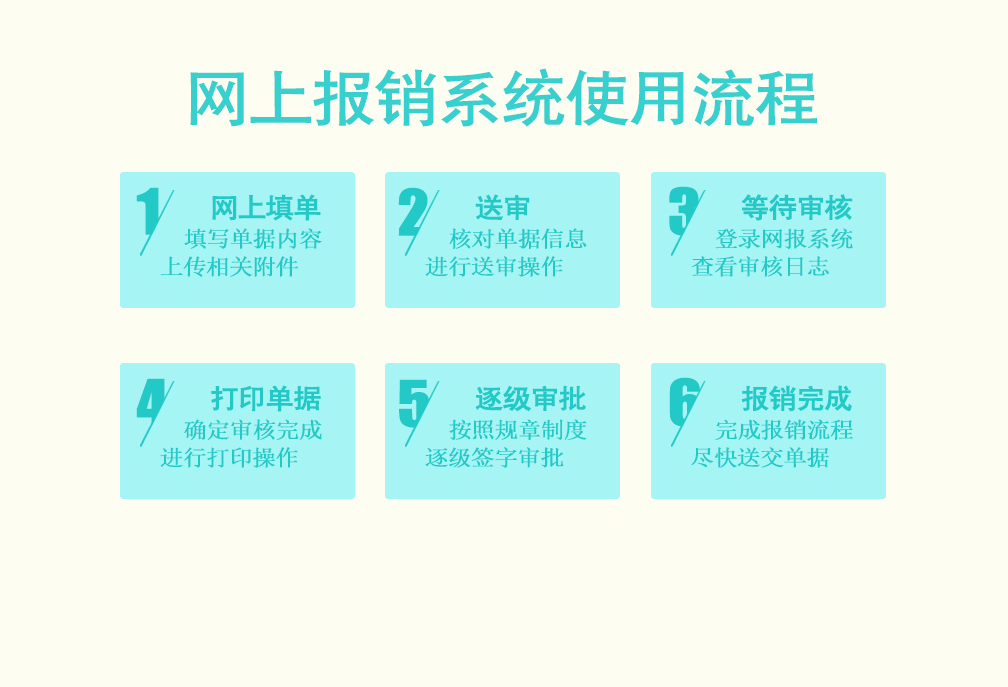
<style>
.page{position:relative;width:1008px;height:687px;background:#fefdf2}
.page>*{position:absolute;margin:0}
.t1{font:60px "-G-h-e-i-0-1-m";letter-spacing:-0.04em;color:#37d0ce;font-weight:bold;scale:1.07 1}
.t2{font:58.5px "Impact";letter-spacing:-0.04em;color:#23c9c7;font-weight:bold;scale:1.07 1}
.t3{font:26.5px "-G-h-e-i-0-1-m";letter-spacing:-0.04em;color:#23c9c7;font-weight:bold;scale:1.06 1}
.t4{font:22.1px "SimSun";letter-spacing:-0.04em;color:#23c9c7;font-weight:bold;scale:1.06 1}
</style>
<div class="page">
<p class="t1" style="left:190px;top:68px;width:627px;height:59px">网上报销系统使用流程</p>
<p class="t2" style="left:136px;top:187px;width:23px;height:48px">1</p>
<p class="t3" style="left:212px;top:194px;width:109px;height:27px">网上填单</p>
<p class="t2" style="left:398px;top:187px;width:30px;height:49px">2</p>
<p class="t3" style="left:475px;top:194px;width:55px;height:26px">送审</p>
<p class="t2" style="left:669px;top:186px;width:30px;height:50px">3</p>
<p class="t3" style="left:741px;top:194px;width:112px;height:27px">等待审核</p>
<p class="t4" style="left:184px;top:228px;width:138px;height:21px">填写单据内容</p>
<p class="t4" style="left:449px;top:228px;width:138px;height:21px">核对单据信息</p>
<p class="t4" style="left:715px;top:228px;width:138px;height:21px">登录网报系统</p>
<p class="t4" style="left:160px;top:256px;width:139px;height:21px">上传相关附件</p>
<p class="t4" style="left:425px;top:256px;width:138px;height:21px">进行送审操作</p>
<p class="t4" style="left:691px;top:256px;width:138px;height:21px">查看审核日志</p>
<p class="t2" style="left:669px;top:377px;width:31px;height:50px">6</p>
<p class="t2" style="left:136px;top:378px;width:32px;height:48px">4</p>
<p class="t3" style="left:211px;top:385px;width:110px;height:27px">打印单据</p>
<p class="t2" style="left:399px;top:379px;width:31px;height:49px">5</p>
<p class="t3" style="left:475px;top:385px;width:111px;height:27px">逐级审批</p>
<p class="t3" style="left:741px;top:385px;width:111px;height:27px">报销完成</p>
<p class="t4" style="left:184px;top:419px;width:138px;height:21px">确定审核完成</p>
<p class="t4" style="left:449px;top:419px;width:138px;height:21px">按照规章制度</p>
<p class="t4" style="left:715px;top:419px;width:138px;height:21px">完成报销流程</p>
<p class="t4" style="left:160px;top:447px;width:138px;height:21px">进行打印操作</p>
<p class="t4" style="left:425px;top:447px;width:139px;height:21px">逐级签字审批</p>
<p class="t4" style="left:691px;top:447px;width:138px;height:21px">尽快送交单据</p>
</div>
